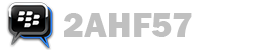
<style>
.page{position:relative;width:255px;height:50px;background:#ffffff}
.page>*{position:absolute;margin:0}
.t1{font:36px "FranklinGothic-Heavy";color:#c0c0c0}
</style>
<div class="page">
<p class="t1" style="left:64px;top:13px;width:128px;height:24px">2AHF57</p>
</div>
